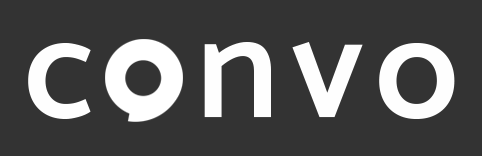
<style>
.page{position:relative;width:482px;height:156px;background:#333333}
.page>*{position:absolute;margin:0}
.t1{font:150px "MoskSemi-Bold600";letter-spacing:0.075em;color:#fefefe}
</style>
<div class="page">
<p class="t1" style="left:28px;top:42px;width:427px;height:77px">c  nvo</p>
</div>
